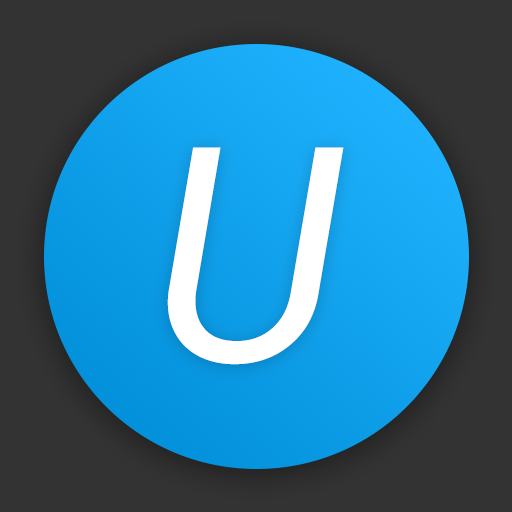
<style>
.page{position:relative;width:512px;height:512px;background:#333333}
.page>*{position:absolute;margin:0}
.t1{font:300px "Roboto-Italic";color:#ffffff}
</style>
<div class="page">
<p class="t1" style="left:167px;top:147px;width:177px;height:218px">U</p>
</div>
